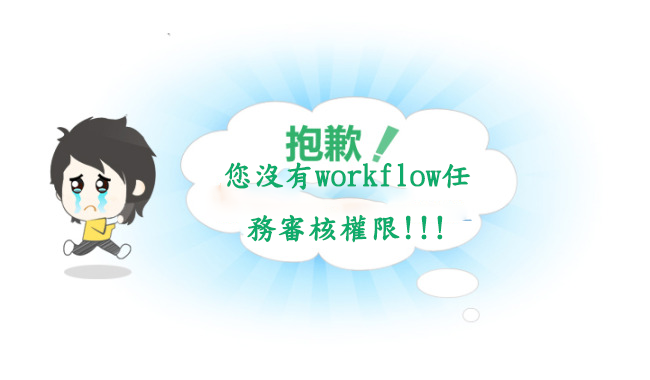
<style>
.page{position:relative;width:650px;height:380px;background:#ffffff}
.page>*{position:absolute;margin:0}
.t1{font:30px "DFKaiShu-SB-Estd-BF";color:#0fab6b;font-weight:bold}
</style>
<div class="page">
<p class="t1" style="left:224px;top:162px;width:247px;height:81px;text-align:center">您沒有workflow任          務審核權限!!!</p>
</div>
